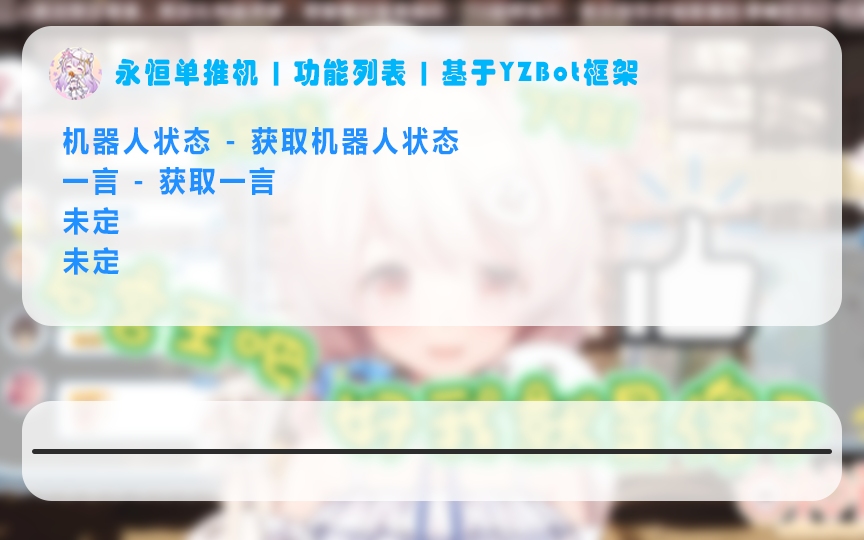
<style>
.page{position:relative;width:864px;height:540px}
.page>*{position:absolute;margin:0}
.t1{font:28.8px "STHupo";letter-spacing:0.17em;color:#00b6fa;scale:0.92 1}
.t2{font:28.8px/40px "MicrosoftYaHei-Bold";letter-spacing:0.17em;color:#1e90ff;scale:0.92 1}
</style>
<div class="page">
<p class="t1" style="left:115px;top:58px;width:523px;height:28px">永恒单推机 | 功能列表 | 基于YZBot框架</p>
<p class="t2" style="left:63px;top:127px;width:396px;height:148px">机器人状态 - 获取机器人状态<br>一言 - 获取一言<br>未定<br>未定</p>
</div>
